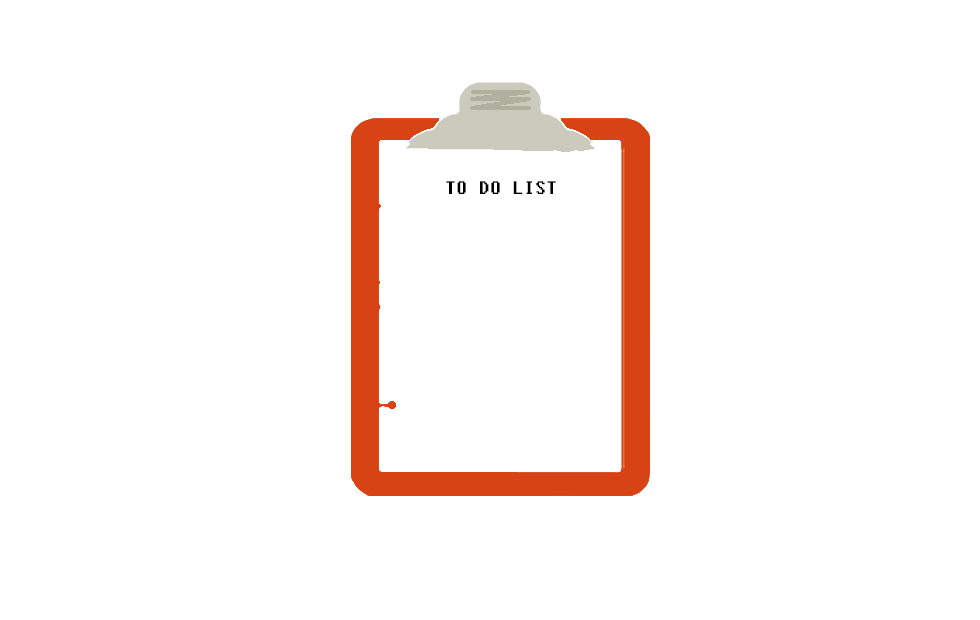
<style>
.page{position:relative;width:980px;height:620px;background:#ffffff}
.page>*{position:absolute;margin:0}
.t1{font:18px "Fixedsys";color:#000000}
</style>
<div class="page">
<p class="t1" style="left:446px;top:181px;width:110px;height:13px">TO DO LIST</p>
</div>
